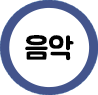
<style>
.page{position:relative;width:98px;height:95px;background:#ffffff}
.page>*{position:absolute;margin:0}
.t1{font:30px "BMJUA";color:#000000}
</style>
<div class="page">
<p class="t1" style="left:25px;top:35px;width:49px;height:26px">음악</p>
</div>
